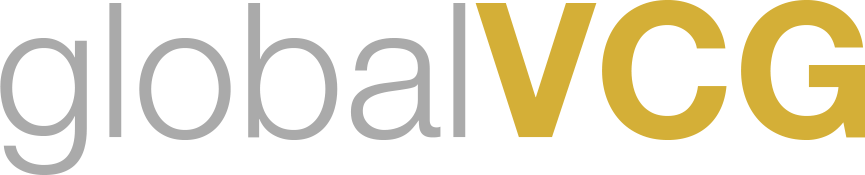
<style>
.page{position:relative;width:865px;height:175px;background:#ffffff}
.page>*{position:absolute;margin:0}
.t1{font:187.5px "HelveticaNeue-Light";color:#aaaaaa}
.t2{font:187.5px "HelveticaNeue-Bold";color:#d4af37}
</style>
<div class="page">
<p class="t1" style="left:0px;top:0px;width:866px;height:175px">global<span class="t2">VCG</span></p>
</div>
